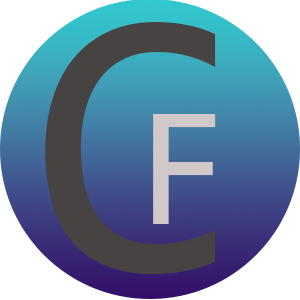
<style>
.page{position:relative;width:300px;height:300px;background:#ffffff}
.page>*{position:absolute;margin:0}
.t1{font:385px "Consolas";color:#484343}
.t2{font:171.7px "Consolas";color:#d1c9c9}
</style>
<div class="page">
<p class="t1" style="left:45px;top:22px;width:171px;height:252px">C</p>
<p class="t2" style="left:153px;top:114px;width:63px;height:110px">F</p>
</div>
